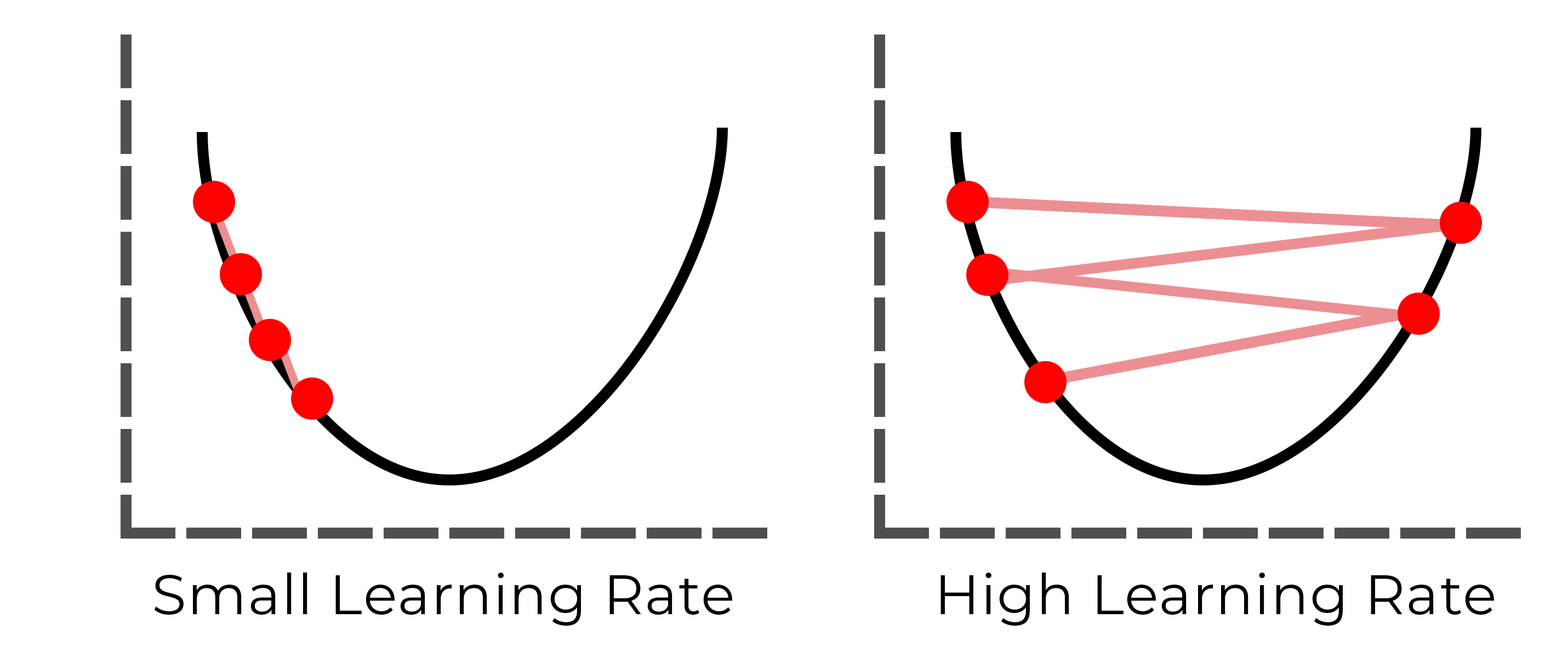
<style>
.page{position:relative;width:1568px;height:658px;background:#ffffff}
.page>*{position:absolute;margin:0}
.t1{font:55.8px "Montserrat-Regular";letter-spacing:0.02em;color:#000000}
</style>
<div class="page">
<p class="t1" style="left:154px;top:573px;width:578px;height:53px">Small Learning Rate</p>
<p class="t1" style="left:940px;top:573px;width:554px;height:53px">High Learning Rate</p>
</div>
